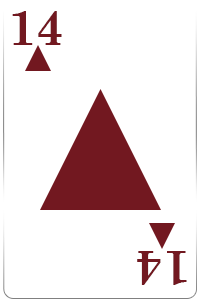
<style>
.page{position:relative;width:200px;height:300px;background:#ffffff}
.page>*{position:absolute;margin:0}
.t1{font:49.4px "CenturySchoolbook-Bold";color:#721820}
</style>
<div class="page">
<p class="t1" style="left:12px;top:11px;width:50px;height:34px">14</p>
<p class="t1" style="left:137px;top:251px;width:50px;height:34px;rotate:-180deg">14</p>
</div>
